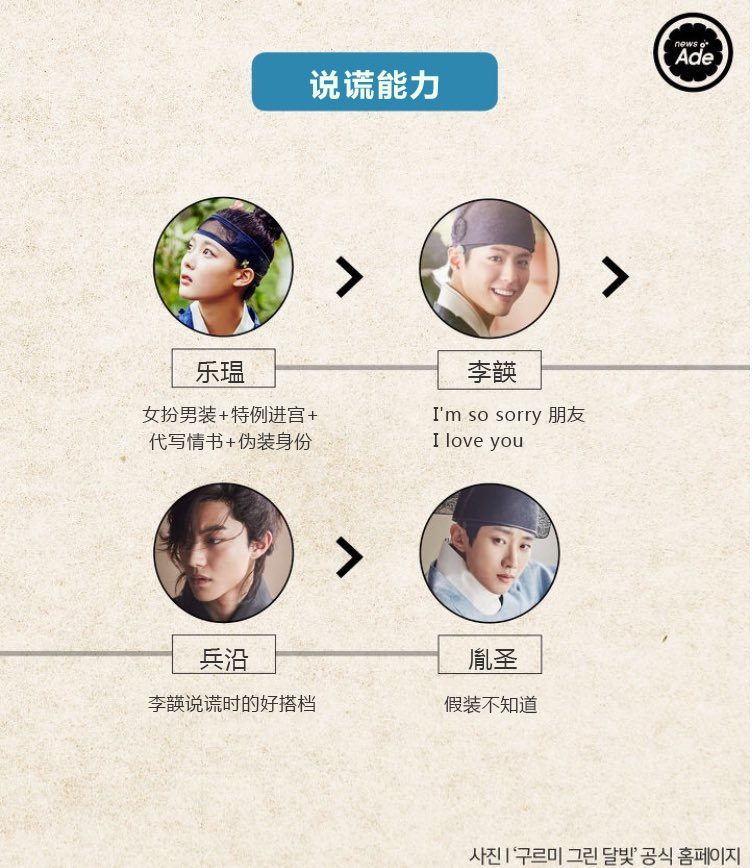
<style>
.page{position:relative;width:752px;height:868px}
.page>*{position:absolute;margin:0}
.t1{font:32px "FZLTCHK--GBK1-0";letter-spacing:0.04em;color:#efffee}
.t2{font:24px "MicrosoftYaHei";letter-spacing:0.04em;color:#333333}
.t3{font:18px/26.7px "MicrosoftYaHei";letter-spacing:0.04em;color:#333333}
.t4{font:18px "MicrosoftYaHei";letter-spacing:0.04em;color:#333333}
</style>
<div class="page">
<p class="t1" style="left:310px;top:70px;width:129px;height:30px">说谎能力</p>
<p class="t2" style="left:196px;top:361px;width:49px;height:22px">乐瑥</p>
<p class="t2" style="left:467px;top:360px;width:50px;height:23px">李韺</p>
<p class="t3" style="left:142px;top:405px;width:176px;height:46px;text-align:center">女扮男装+特例进宫+<br>代写情书+伪装身份</p>
<p class="t3" style="left:433px;top:406px;width:152px;height:45px">I'm so sorry 朋友<br>I love you</p>
<p class="t2" style="left:200px;top:648px;width:49px;height:23px">兵沿</p>
<p class="t2" style="left:468px;top:648px;width:50px;height:22px">胤圣</p>
<p class="t4" style="left:148px;top:695px;width:168px;height:17px">李韺说谎时的好搭档</p>
<p class="t4" style="left:444px;top:695px;width:93px;height:19px">假装不知道</p>
</div>
